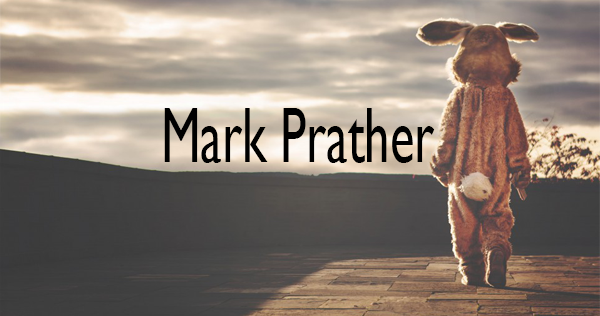
<style>
.page{position:relative;width:600px;height:316px}
.page>*{position:absolute;margin:0}
.t1{font:78.5px "GillSans";color:#000000;scale:0.64 1}
</style>
<div class="page">
<p class="t1" style="left:164px;top:108px;width:271px;height:55px">Mark Prather</p>
</div>
